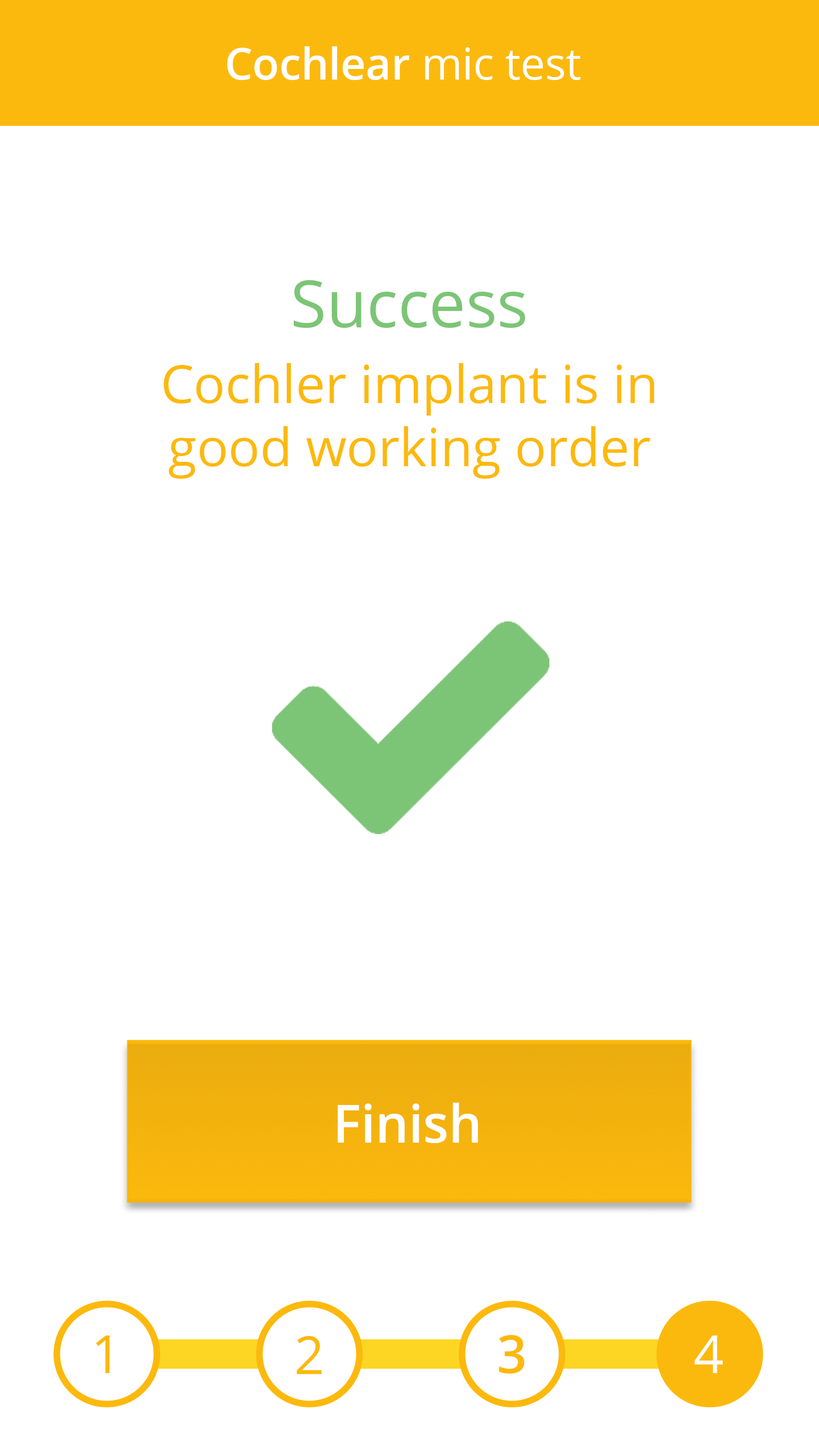
<style>
.page{position:relative;width:819px;height:1456px;background:#ffffff}
.page>*{position:absolute;margin:0}
.t1{font:43.7px "OpenSans-Semibold";color:#ffffff}
.t2{font:43.7px "OpenSans";color:#ffffff}
.t3{font:52.4px "OpenSans";color:#fcb90d}
.t4{font:65.5px "OpenSans";color:#7cc576}
.t5{font:52.4px "OpenSans-Semibold";color:#ffffff}
.t6{font:52.4px "OpenSans-Semibold";color:#fcb90d}
.t7{font:52.4px "OpenSans";color:#ffffff}
</style>
<div class="page">
<p class="t1" style="left:227px;top:46px;width:354px;height:34px">Cochlear <span class="t2">mic test</span></p>
<p class="t3" style="left:163px;top:280px;width:491px;height:199px;text-align:center"><span class="t4">Success<br><br></span>Cochler implant is in good working order</p>
<p class="t5" style="left:338px;top:1103px;width:140px;height:40px">Finish</p>
<p class="t3" style="left:95px;top:1336px;width:15px;height:37px">1</p>
<p class="t3" style="left:297px;top:1336px;width:25px;height:38px">2</p>
<p class="t6" style="left:499px;top:1335px;width:25px;height:39px">3</p>
<p class="t7" style="left:694px;top:1336px;width:29px;height:37px">4</p>
</div>
